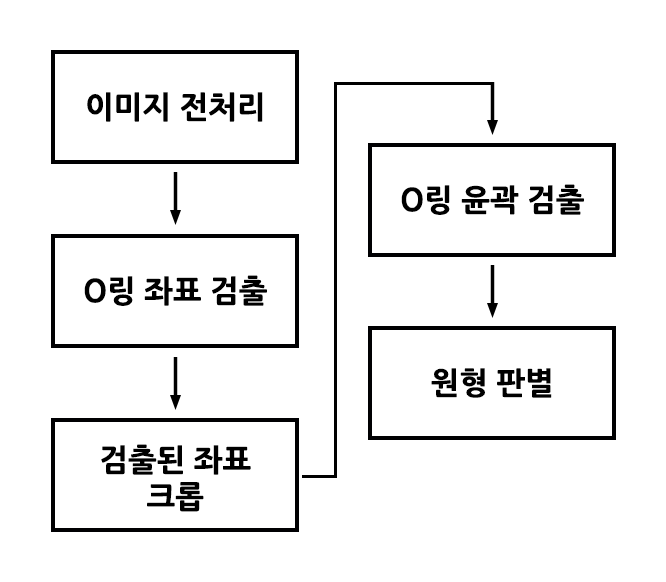
<style>
.page{position:relative;width:666px;height:582px;background:#ffffff}
.page>*{position:absolute;margin:0}
.t1{font:30.5px "NanumGothicExtraBold";color:#000000}
.t2{font:30.5px/37px "NanumGothicExtraBold";color:#000000}
</style>
<div class="page">
<p class="t1" style="left:87px;top:92px;width:176px;height:30px">이미지 전처리</p>
<p class="t1" style="left:401px;top:184px;width:183px;height:31px">O링 윤곽 검출</p>
<p class="t1" style="left:84px;top:275px;width:183px;height:31px">O링 좌표 검출</p>
<p class="t1" style="left:431px;top:368px;width:121px;height:30px">원형 판별</p>
<p class="t2" style="left:101px;top:444px;width:150px;height:68px;text-align:center">검출된 좌표<br>크롭</p>
</div>
